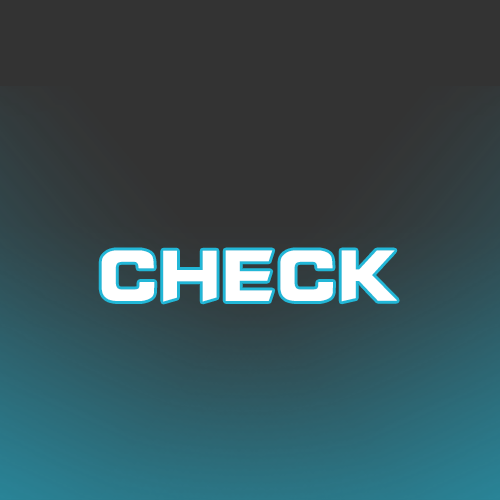
<style>
.page{position:relative;width:500px;height:500px;background:#333333}
.page>*{position:absolute;margin:0}
.t1{font:75px "HYk2gj";color:#ffffff}
</style>
<div class="page">
<p class="t1" style="left:101px;top:250px;width:296px;height:52px">CHECK</p>
</div>
